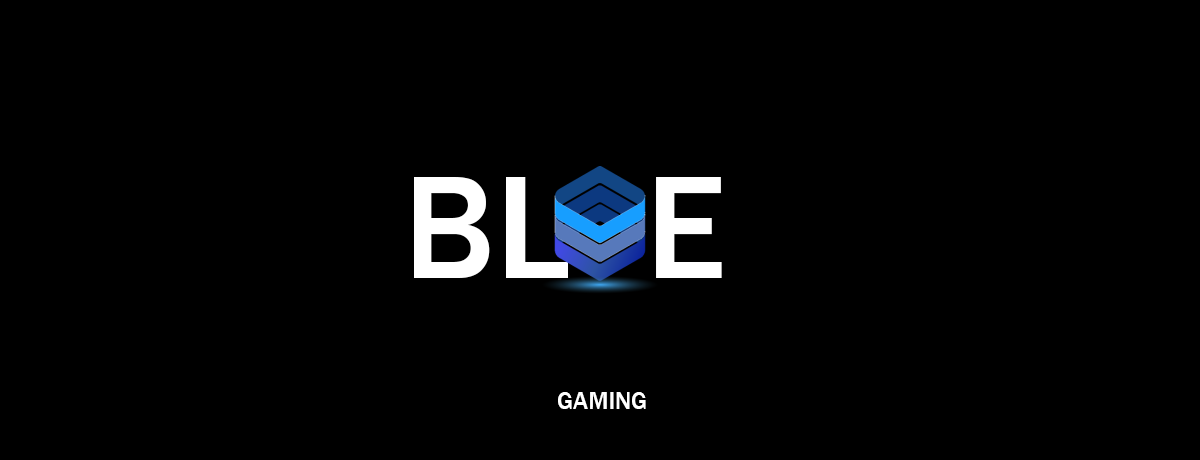
<style>
.page{position:relative;width:1200px;height:460px;background:#000000}
.page>*{position:absolute;margin:0}
.t1{font:151px "FranklinGothic-Medium";color:#ffffff}
.t2{font:25px "FranklinGothic-Medium";color:#ffffff}
</style>
<div class="page">
<p class="t1" style="left:414px;top:177px;width:308px;height:101px">BL  E</p>
<p class="t2" style="left:558px;top:392px;width:88px;height:17px">GAMING</p>
</div>
